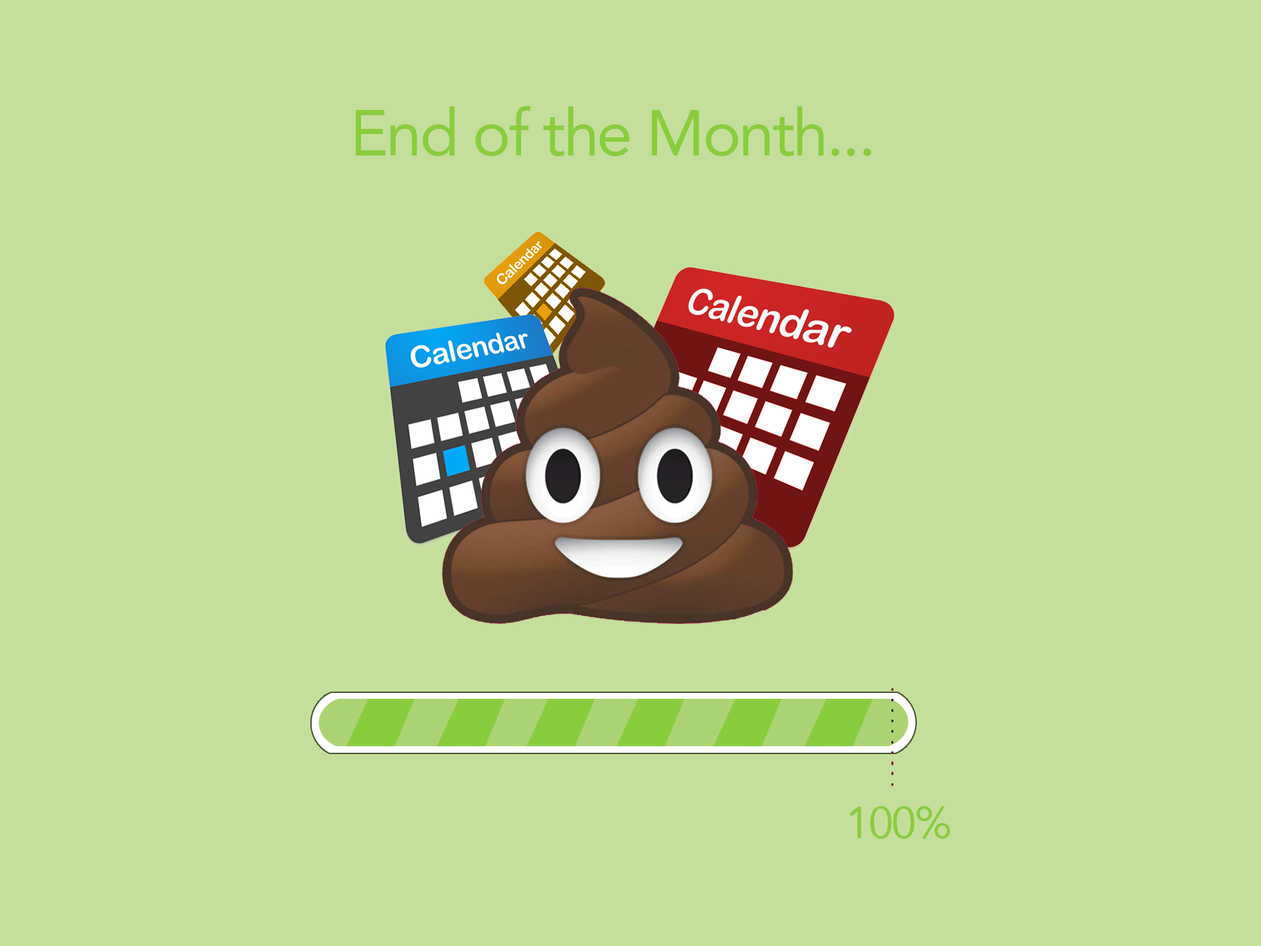
<style>
.page{position:relative;width:1261px;height:946px;background:#c4df9b}
.page>*{position:absolute;margin:0}
.t1{font:64.2px "Avenir-Roman";letter-spacing:-0.032em;color:#89cd3e}
.t2{font:44px "Avenir-Roman";letter-spacing:-0.032em;color:#89cd3e}
</style>
<div class="page">
<p class="t1" style="left:355px;top:106px;width:516px;height:50px">End of the Month...</p>
<p class="t2" style="left:849px;top:805px;width:101px;height:34px">100%</p>
</div>
